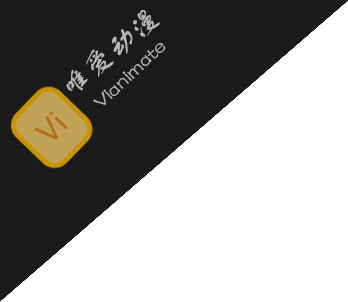
<style>
.page{position:relative;width:348px;height:302px;background:#ffffff}
.page>*{position:absolute;margin:0}
.t1{font:30px "FZSTK--GBK1-0";color:#b7b7b7}
.t2{font:20px "FZSTK--GBK1-0";color:#b7b7b7}
</style>
<div class="page">
<p class="t1" style="left:66px;top:10px;width:95px;height:81px;rotate:-40deg">唯爱动漫</p>
<p class="t2" style="left:93px;top:43px;width:73px;height:62px;rotate:-43deg">Vianimate</p>
</div>
